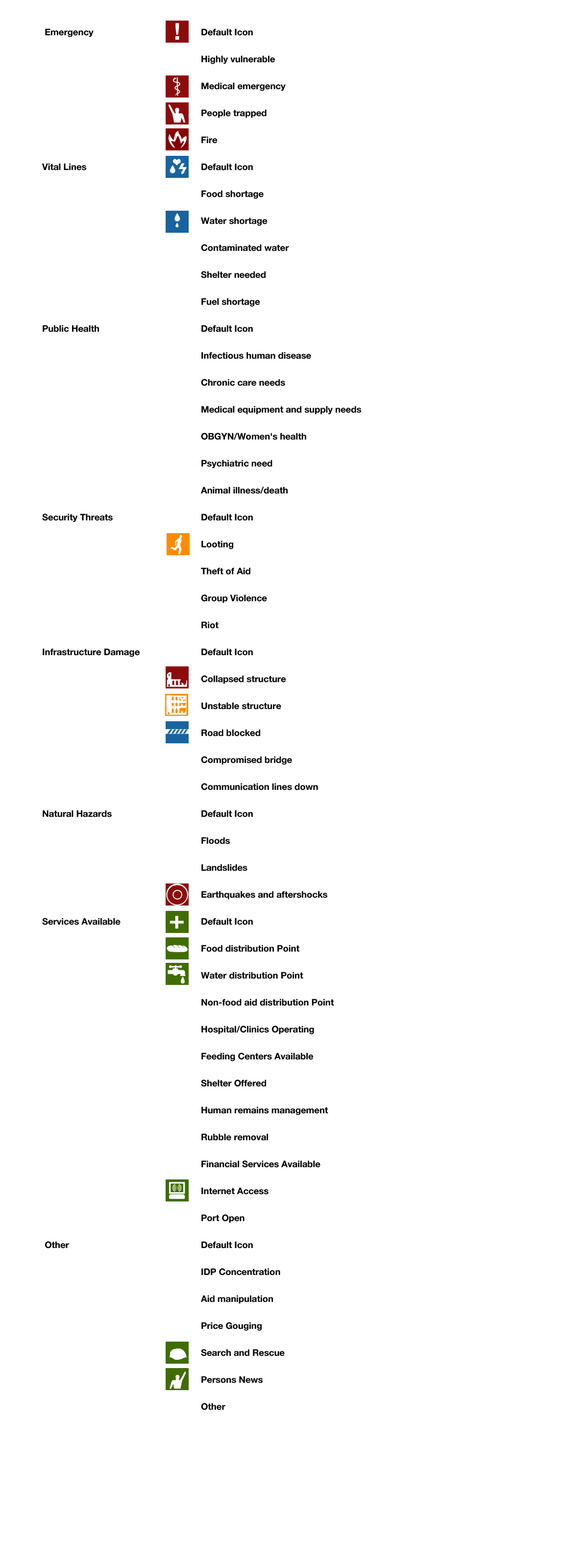
<style>
.page{position:relative;width:588px;height:1568px;background:#ffffff}
.page>*{position:absolute;margin:0}
.t1{font:9px/26.9px "HelveticaNeue-Bold";color:#000000}
.t2{font:23.2px "HelveticaNeue-Bold";color:#ffffff}
.t3{font:25px "HelveticaNeue-Bold";color:#ffffff;scale:1.08 1}
</style>
<div class="page">
<p class="t1" style="left:42px;top:28px;width:319px;height:1382px">Emergency       Default Icon<br>         Highly vulnerable<br>         Medical emergency<br>         People trapped<br>         Fire<br>Vital Lines       Default Icon<br>         Food shortage<br>         Water shortage<br>         Contaminated water<br>         Shelter needed<br>         Fuel shortage <br>Public Health      Default Icon<br>         Infectious human disease<br>         Chronic care needs<br>         Medical equipment and supply needs<br>         OBGYN/Women's health<br>         Psychiatric need<br>         Animal illness/death<br>Security Threats     Default Icon<br>         Looting<br>         Theft of Aid<br>         Group Violence<br>         Riot<br>Infrastructure Damage    Default Icon<br>         Collapsed structure<br>         Unstable structure<br>         Road blocked<br>         Compromised bridge<br>         Communication lines down<br>Natural Hazards      Default Icon<br>         Floods<br>         Landslides<br>         Earthquakes and aftershocks<br>Services Available     Default Icon<br>         Food distribution Point<br>         Water distribution Point<br>         Non-food aid distribution Point<br>         Hospital/Clinics Operating<br>         Feeding Centers Available<br>         Shelter Offered<br>         Human remains management<br>         Rubble removal<br>         Financial Services Available<br>         Internet Access<br>         Port Open<br> Other        Default Icon<br>         IDP Concentration<br>         Aid manipulation<br>         Price Gouging<br>         Search and Rescue<br>         Persons News<br>         Other</p>
<p class="t2" style="left:175px;top:23px;width:4px;height:17px">!</p>
<p class="t3" style="left:170px;top:916px;width:14px;height:13px">+</p>
</div>
